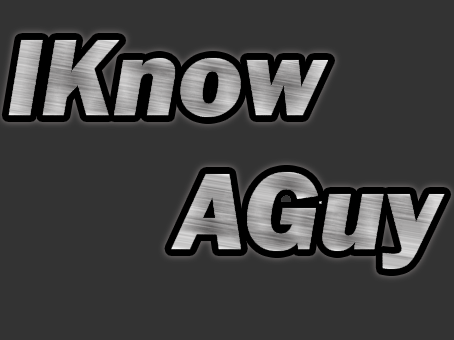
<style>
.page{position:relative;width:454px;height:340px;background:#333333}
.page>*{position:absolute;margin:0}
.t1{font:112px "FranklinGothic-HeavyItalic"}
</style>
<div class="page">
<p class="t1" style="left:8px;top:40px;width:437px;height:229px">IKnow<br>      AGuy</p>
</div>
